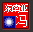
<style>
.page{position:relative;width:33px;height:32px;background:#f20000}
.page>*{position:absolute;margin:0}
.t1{font:10.4px "SimSun";letter-spacing:-0.25em;color:#ffffff}
.t2{font:11.7px "SimSun";color:#ffffff}
</style>
<div class="page">
<p class="t1" style="left:4px;top:4px;width:24px;height:9px">东南亚</p>
<p class="t2" style="left:16px;top:15px;width:11px;height:12px">冯</p>
</div>
